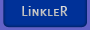
<style>
.page{position:relative;width:90px;height:30px;background:#003198}
.page>*{position:absolute;margin:0}
.t1{font:14px "MetaPlusCapsBookNormal";color:#c2c2c2}
</style>
<div class="page">
<p class="t1" style="left:22px;top:6px;width:46px;height:10px">LinkleR</p>
</div>
